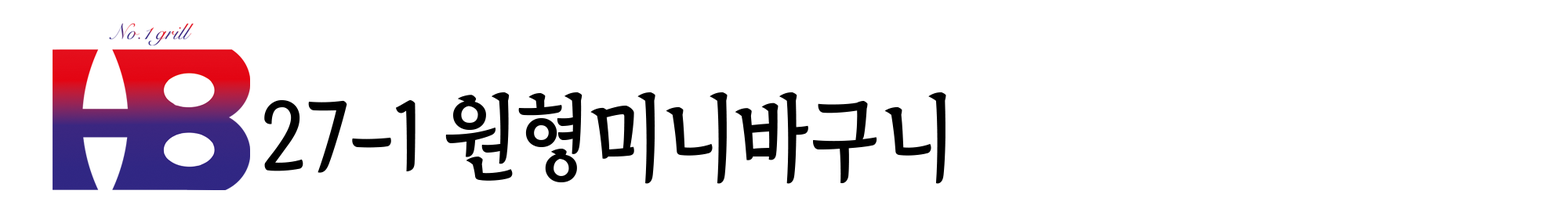
<style>
.page{position:relative;width:1568px;height:205px;background:#ffffff}
.page>*{position:absolute;margin:0}
.t1{font:93.7px "TheIndependenceHallofKorea-Regular";color:#000000;scale:0.89 1}
</style>
<div class="page">
<p class="t1" style="left:264px;top:93px;width:682px;height:91px">27-1 원형미니바구니</p>
</div>
